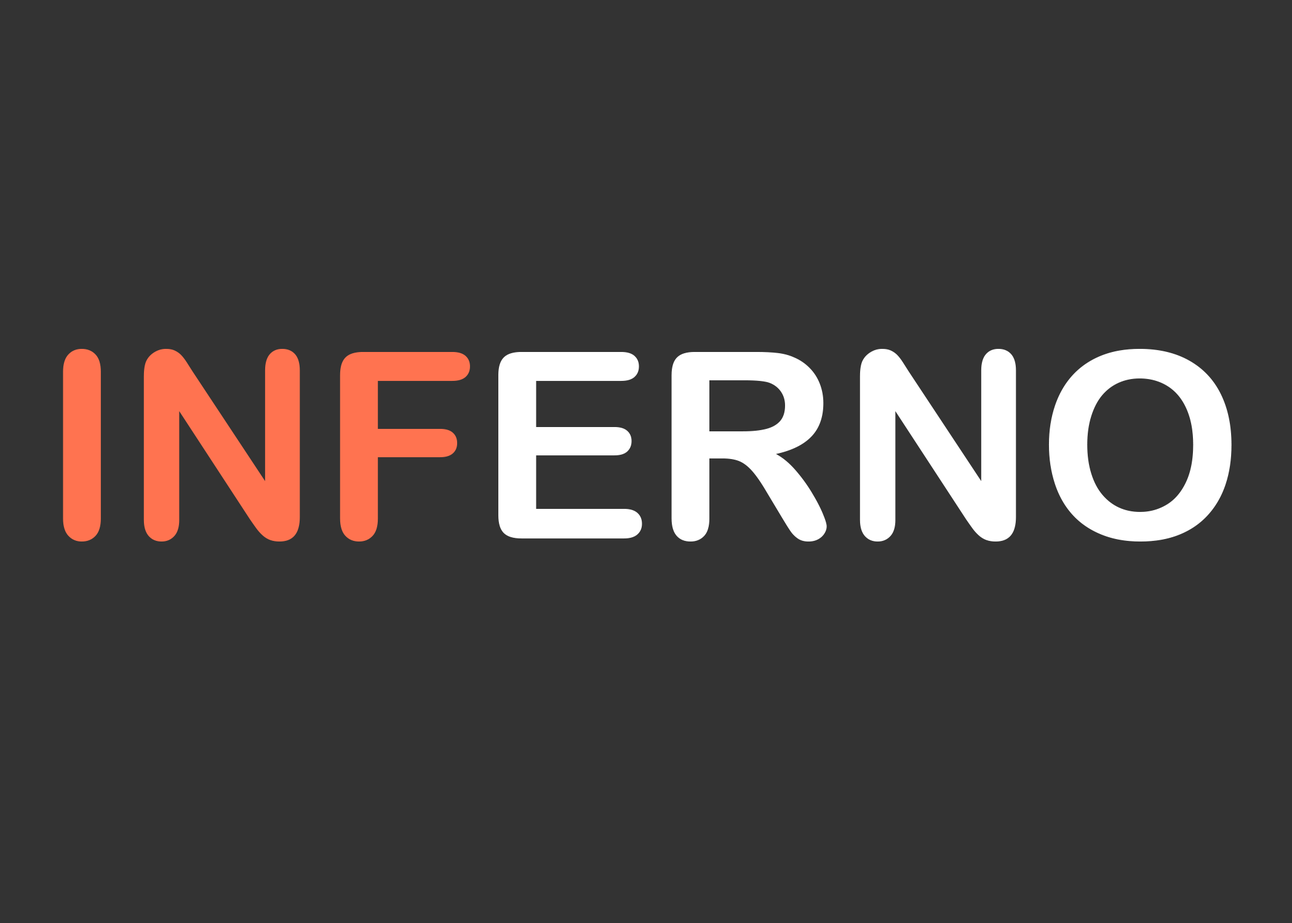
<style>
.page{position:relative;width:1292px;height:923px;background:#333333}
.page>*{position:absolute;margin:0}
.t1{font:260.5px "ArialRoundedMTBold";color:#ffffff}
.t2{font:260.5px "ArialRoundedMTBold";color:#ff7350}
</style>
<div class="page">
<p class="t1" style="left:63px;top:349px;width:1169px;height:192px"><span class="t2">INF</span>ERNO</p>
</div>
